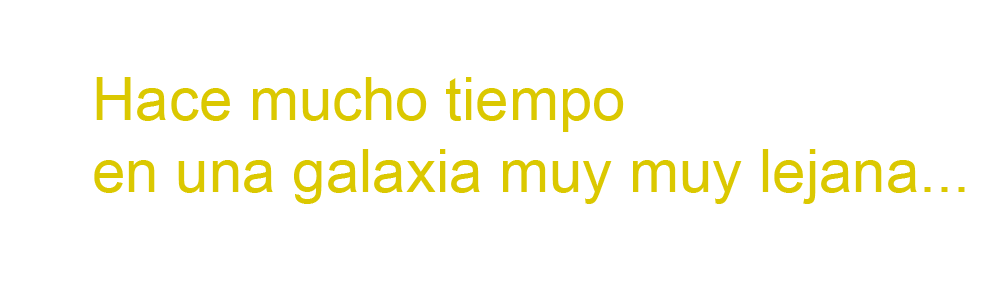
<style>
.page{position:relative;width:1000px;height:300px;background:#ffffff}
.page>*{position:absolute;margin:0}
.t1{font:60px "ArialMT";color:#dbc800}
.t2{font:72px "DesignerPixels";color:#000000}
</style>
<div class="page">
<p class="t1" style="left:94px;top:77px;width:871px;height:127px"><span class="t2"><br></span>Hace mucho tiempo <br>en una galaxia muy muy lejana...</p>
</div>
